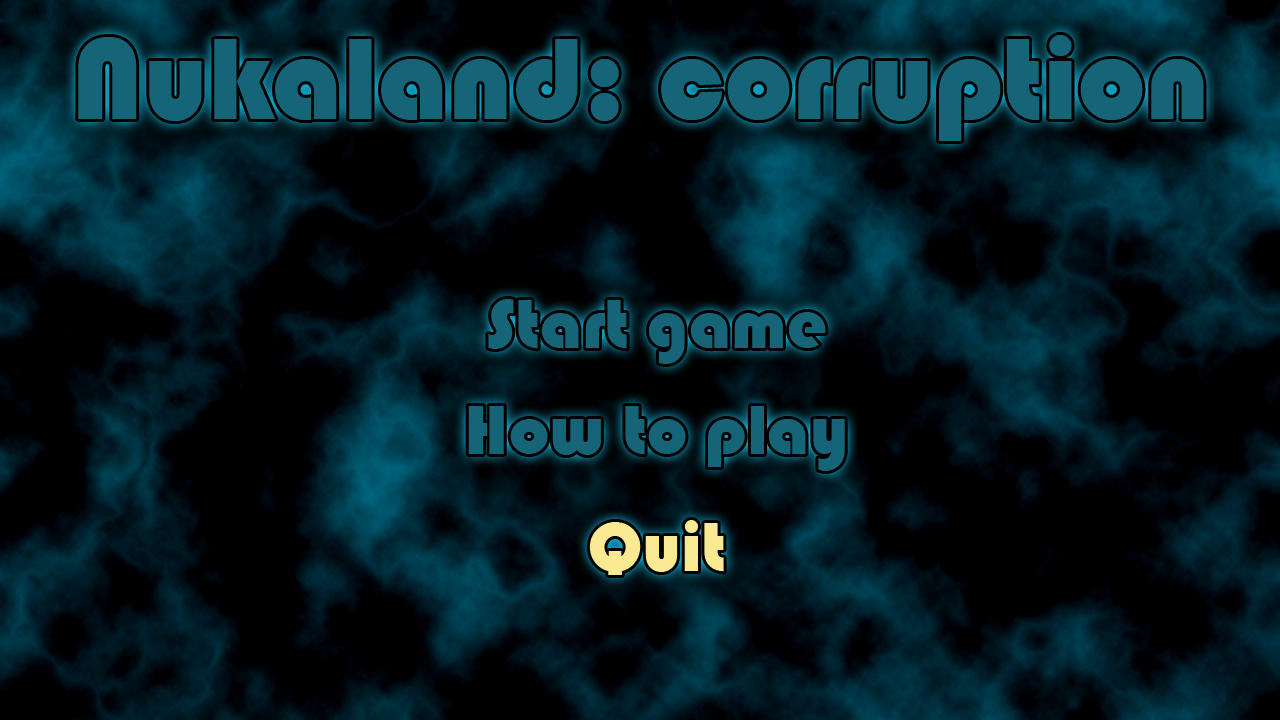
<style>
.page{position:relative;width:1280px;height:720px;background:#000000}
.page>*{position:absolute;margin:0}
.t1{font:120px "Bauhaus93";color:#166477}
.t2{font:72px "Bauhaus93";color:#166477}
.t3{font:72px "Bauhaus93";color:#f9e992}
</style>
<div class="page">
<p class="t1" style="left:78px;top:35px;width:1126px;height:106px">Nukaland: corruption</p>
<p class="t2" style="left:488px;top:299px;width:338px;height:65px">Start game</p>
<p class="t2" style="left:468px;top:406px;width:377px;height:65px">How to play</p>
<p class="t3" style="left:589px;top:520px;width:135px;height:55px">Quit</p>
</div>
